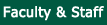
<style>
.page{position:relative;width:107px;height:25px;background:#005941}
.page>*{position:absolute;margin:0}
.t1{font:14px "Tahoma";letter-spacing:0.02em;color:#ffffff;font-weight:bold}
</style>
<div class="page">
<p class="t1" style="left:3px;top:6px;width:101px;height:15px">Faculty &amp; Staff</p>
</div>
